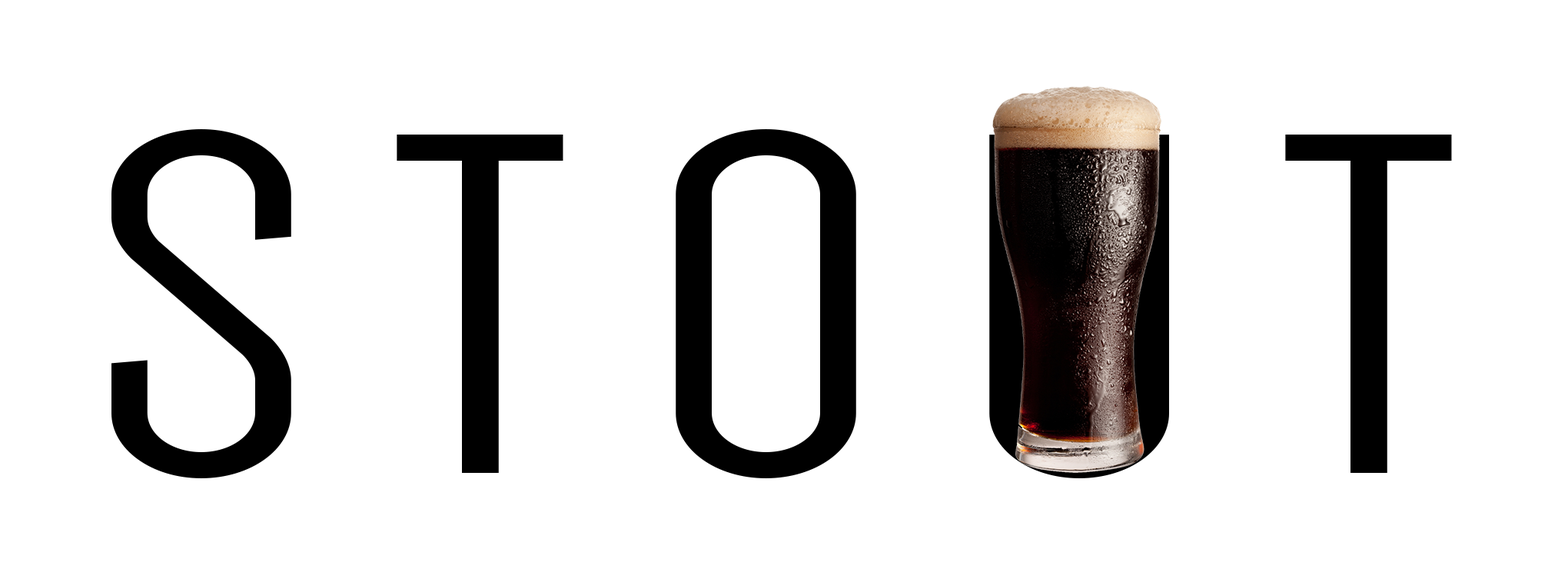
<style>
.page{position:relative;width:1568px;height:579px;background:#ffffff}
.page>*{position:absolute;margin:0}
.t1{font:501.3px "Dense-Regular";letter-spacing:0.1em;color:#000000;scale:1.38 1}
</style>
<div class="page">
<p class="t1" style="left:111px;top:129px;width:1341px;height:349px">STOUT</p>
</div>
